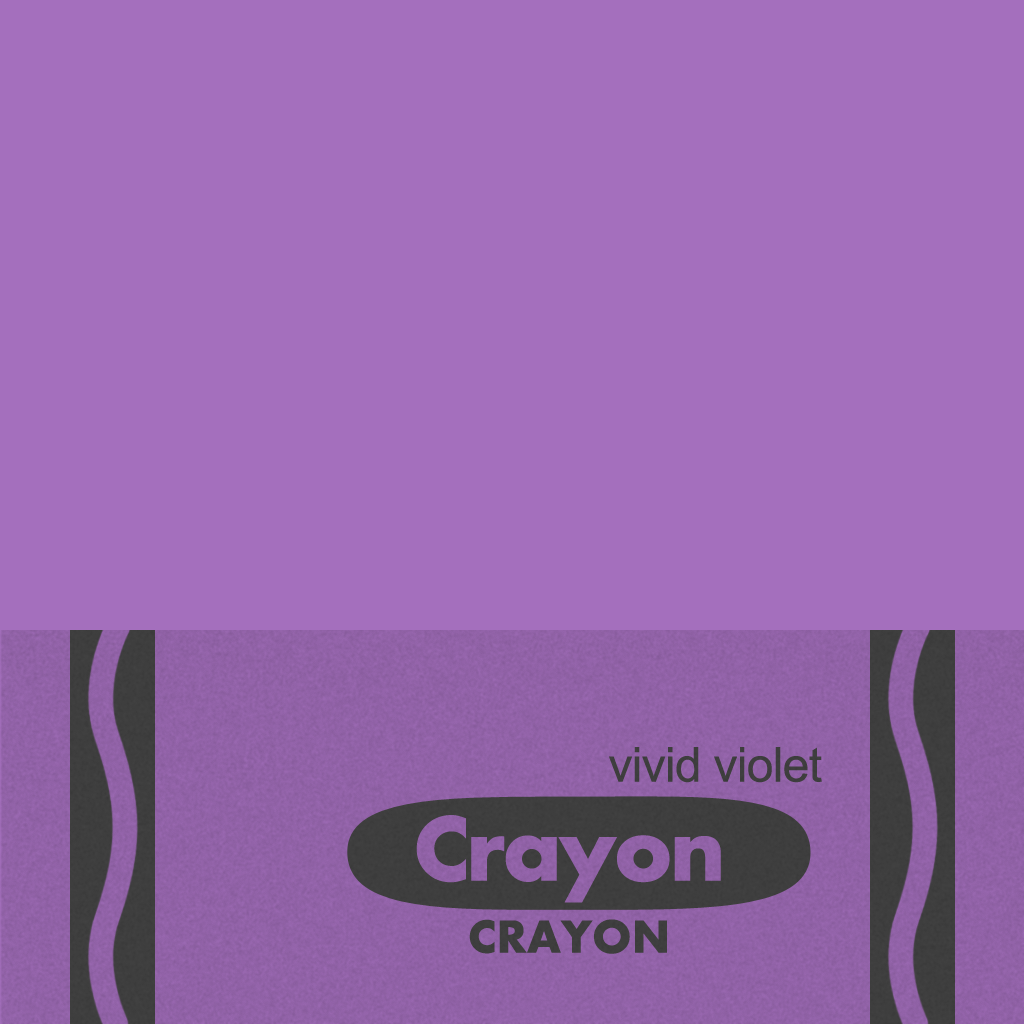
<style>
.page{position:relative;width:1024px;height:1024px;background:#a46fbd}
.page>*{position:absolute;margin:0}
.t1{font:48px "ArialMT";letter-spacing:-0.015em;color:#464646}
.t2{font:96px "Futura-Bold";letter-spacing:-0.035em;color:#a46fbd}
.t3{font:48px "Futura-Bold";letter-spacing:0.005em;color:#464646}
</style>
<div class="page">
<p class="t1" style="left:609px;top:747px;width:213px;height:36px">vivid violet</p>
<p class="t2" style="left:416px;top:815px;width:305px;height:88px">Crayon</p>
<p class="t3" style="left:469px;top:919px;width:198px;height:35px">CRAYON</p>
</div>
